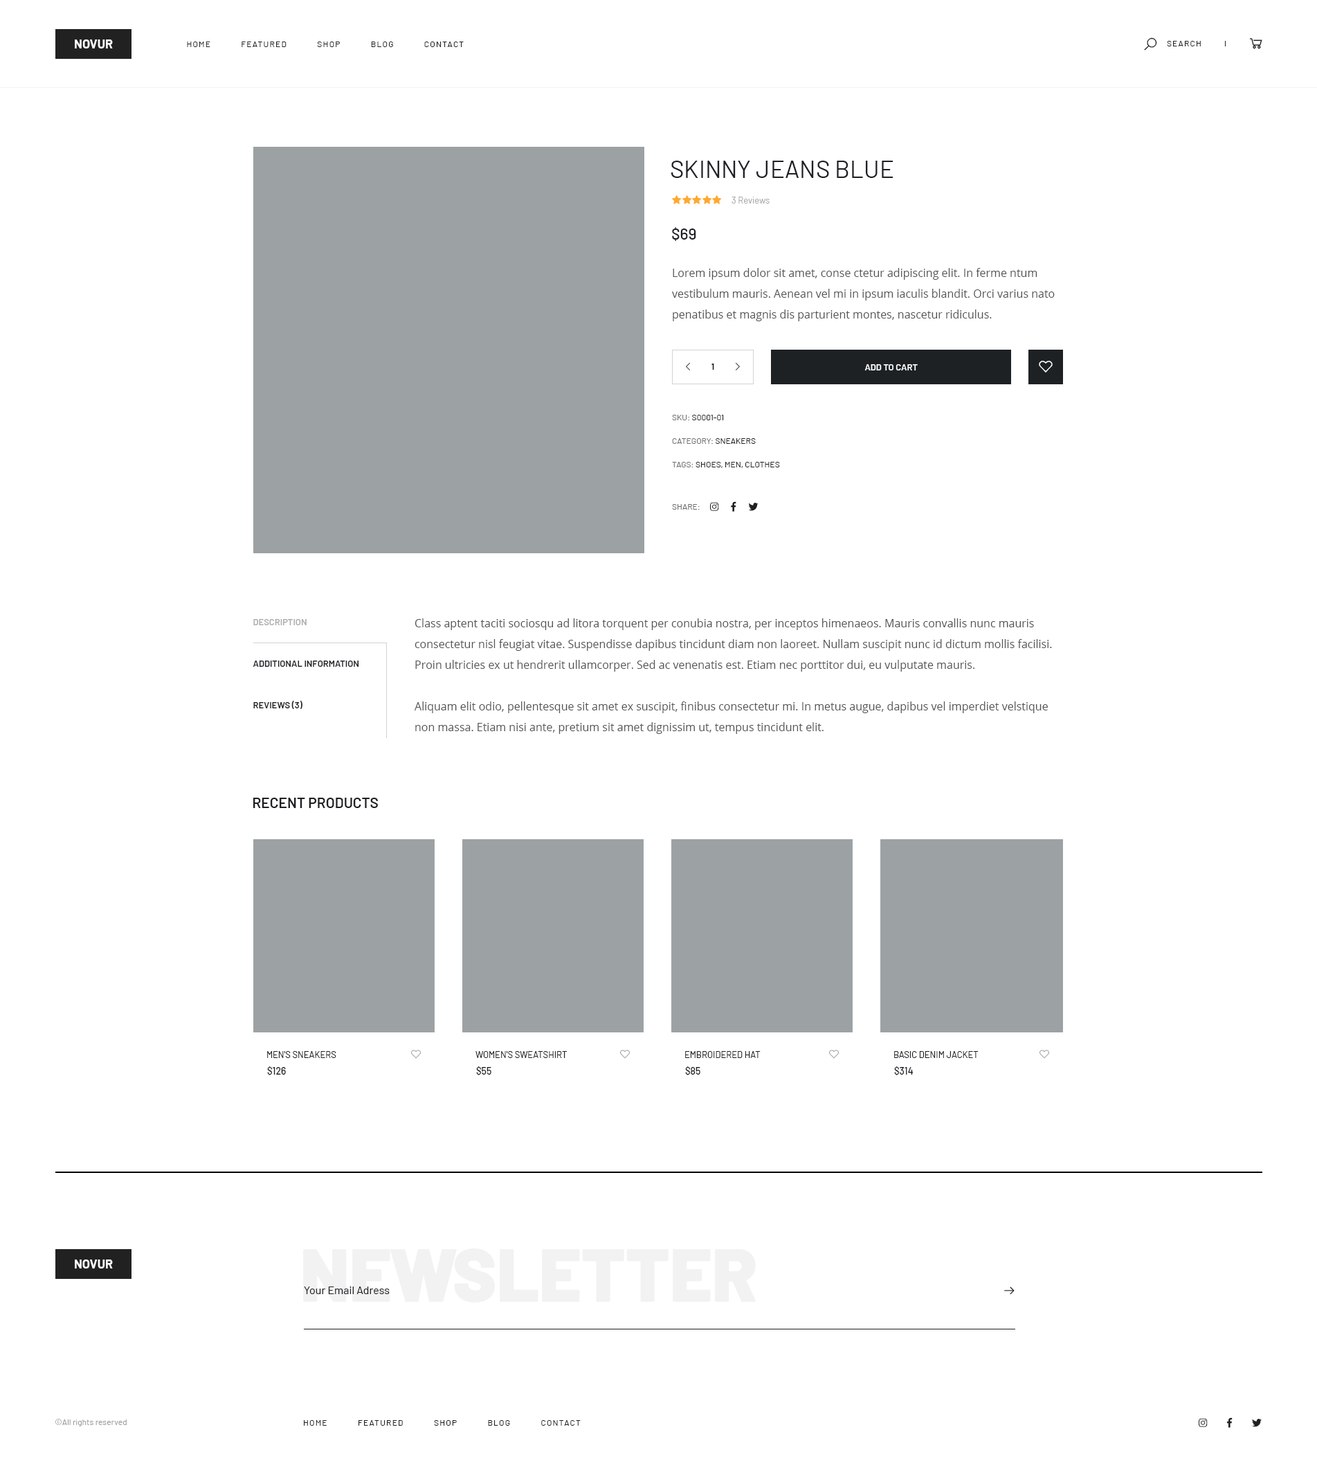
<style>
.page{position:relative;width:1317px;height:1470px;background:#ffffff}
.page>*{position:absolute;margin:0}
.t1{font:12.5px "Barlow-Bold";color:#fefefe;text-transform:uppercase}
.t2{font:8.3px "Barlow-Regular";letter-spacing:0.1em;color:#1e2124;text-transform:uppercase}
.t3{font:24.2px "Barlow-Regular";color:#1e2124;text-transform:uppercase}
.t4{font:9px "Barlow-Regular";color:#aaabab}
.t5{font:15.9px "Barlow-Medium";color:#1e2124}
.t6{font:11.1px/20.8px "OpenSans";color:#535455}
.t7{font:8.3px "Barlow-Bold";color:#1e2124;text-transform:uppercase}
.t8{font:9px "Barlow-SemiBold";color:#ffffff;text-transform:uppercase}
.t9{font:8.3px/23.5px "Barlow-Regular";color:#1e2124;text-transform:uppercase}
.t10{font:8.3px/23.5px "Barlow-Regular";color:#6e7071;text-transform:uppercase}
.t11{font:8.3px "Barlow-Regular";color:#6e7071;text-transform:uppercase}
.t12{font:9px/41.5px "Barlow-SemiBold";color:#1e2124;text-transform:uppercase}
.t13{font:9px/41.5px "Barlow-SemiBold";color:#aeaeae;text-transform:uppercase}
.t14{font:14.5px "Barlow-SemiBold";color:#1e2124;text-transform:uppercase}
.t15{font:9px "Barlow-Regular";color:#1e2124;text-transform:uppercase}
.t16{font:9.7px "Barlow-Medium";color:#1e2124}
.t17{font:74.1px "Barlow-Black";color:#f2f2f2}
.t18{font:11.1px "Barlow-Regular";color:#1e2124}
.t19{font:8.3px "Barlow-Regular";color:#9e9d9d}
</style>
<div class="page">
<p class="t1" style="left:75px;top:39px;width:38px;height:9px">novur</p>
<p class="t2" style="left:187px;top:42px;width:277px;height:5px">Home            Featured            Shop            Blog            Contact</p>
<p class="t2" style="left:1167px;top:41px;width:34px;height:5px">Search</p>
<p class="t3" style="left:672px;top:161px;width:222px;height:17px">Skinny Jeans Blue</p>
<p class="t4" style="left:732px;top:197px;width:38px;height:7px">3 Reviews</p>
<p class="t5" style="left:672px;top:227px;width:24px;height:14px">$69</p>
<p class="t6" style="left:672px;top:268px;width:383px;height:53px">Lorem ipsum dolor sit amet, conse ctetur adipiscing elit. In ferme ntum    vestibulum mauris. Aenean vel mi in ipsum iaculis blandit. Orci varius nato penatibus et magnis dis parturient montes, nascetur ridiculus.</p>
<p class="t7" style="left:712px;top:363px;width:2px;height:7px">1</p>
<p class="t8" style="left:865px;top:364px;width:53px;height:6px">Add to cart</p>
<p class="t9" style="left:672px;top:415px;width:108px;height:53px"><span class="t10">SKU: </span>S0001-01<br><span class="t10">Category: </span>Sneakers<br><span class="t10">Tags: </span>Shoes, Men, Clothes</p>
<p class="t11" style="left:672px;top:504px;width:28px;height:6px">Share:</p>
<p class="t12" style="left:253px;top:619px;width:106px;height:90px"><span class="t13">Description<br></span>additional information<br>Reviews (3)</p>
<p class="t6" style="left:415px;top:618px;width:637px;height:116px">Class aptent taciti sociosqu ad litora torquent per conubia nostra, per inceptos himenaeos. Mauris convallis nunc mauris   consectetur nisl feugiat vitae. Suspendisse dapibus tincidunt diam non laoreet. Nullam suscipit nunc id dictum mollis facilisi. Proin ultricies ex ut hendrerit ullamcorper. Sed ac venenatis est. Etiam nec porttitor dui, eu vulputate mauris. <br><br>Aliquam elit odio, pellentesque sit amet ex suscipit, finibus consectetur mi. In metus augue, dapibus vel imperdiet velstique non massa. Etiam nisi ante, pretium sit amet dignissim ut, tempus tincidunt elit.</p>
<p class="t14" style="left:253px;top:798px;width:125px;height:10px">Recent Products</p>
<p class="t15" style="left:267px;top:1051px;width:69px;height:7px">Men's Sneakers</p>
<p class="t15" style="left:476px;top:1051px;width:91px;height:7px">Women's Sweatshirt</p>
<p class="t15" style="left:685px;top:1051px;width:76px;height:7px">Embroidered Hat</p>
<p class="t15" style="left:894px;top:1051px;width:85px;height:7px">Basic Denim Jacket</p>
<p class="t16" style="left:267px;top:1066px;width:19px;height:9px">$126</p>
<p class="t16" style="left:476px;top:1066px;width:16px;height:9px">$55</p>
<p class="t16" style="left:685px;top:1066px;width:16px;height:9px">$85</p>
<p class="t16" style="left:894px;top:1066px;width:20px;height:9px">$314</p>
<p class="t17" style="left:303px;top:1248px;width:453px;height:54px">NEWSLETTER</p>
<p class="t1" style="left:75px;top:1259px;width:38px;height:9px">Novur</p>
<p class="t18" style="left:304px;top:1286px;width:86px;height:8px">Your Email Adress</p>
<p class="t19" style="left:55px;top:1419px;width:72px;height:7px">©All rights reserved</p>
<p class="t2" style="left:304px;top:1420px;width:277px;height:5px">Home            Featured            Shop            Blog            Contact</p>
</div>
